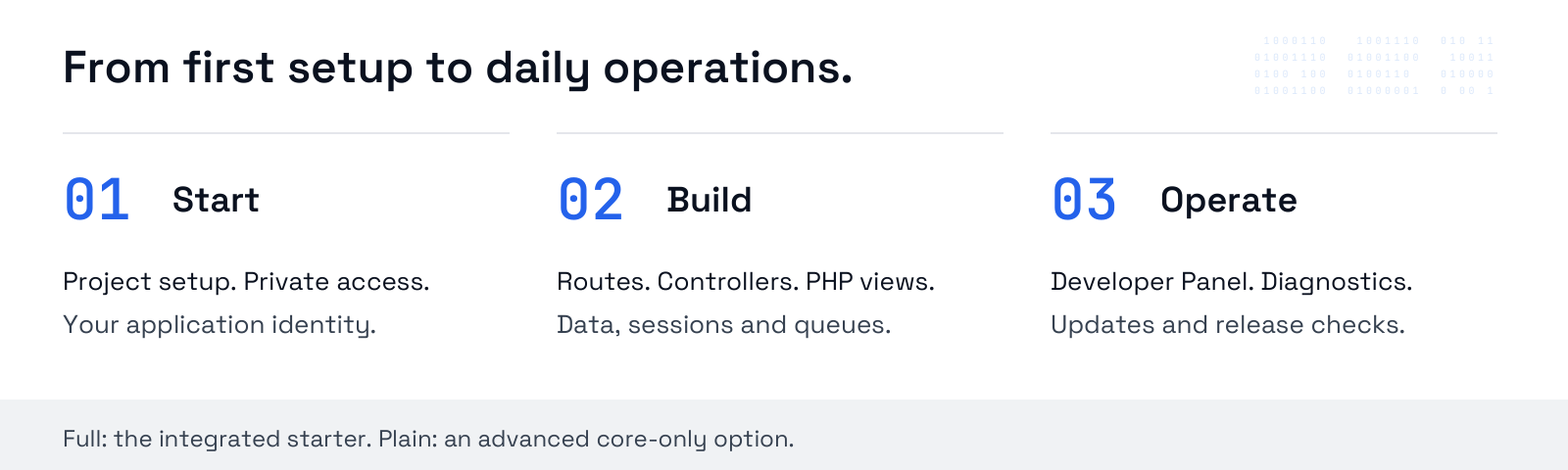
<style>
.page{position:relative;width:1568px;height:470px;background:#ffffff}
.page>*{position:absolute;margin:0}
.t1{font:45.1px "SpaceGrotesk-SemiBold";color:#0b1220}
.t2{font:56.8px "JetBrainsMono-SemiBold";color:#2563eb}
.t3{font:35.3px "SpaceGrotesk-SemiBold";color:#0b1220}
.t4{font:25.5px "SpaceGrotesk-Regular";color:#0b1220}
.t5{font:25.5px "SpaceGrotesk-Regular";color:#374151}
.t6{font:23.5px "SpaceGrotesk-Regular";color:#374151}
</style>
<div class="page">
<p class="t1" style="left:61px;top:35px;width:795px;height:63px">From first setup to daily operations.</p>
<p class="t2" style="left:555px;top:159px;width:72px;height:80px">02</p>
<p class="t2" style="left:1049px;top:159px;width:72px;height:80px">03</p>
<p class="t3" style="left:171px;top:174px;width:92px;height:50px">Start</p>
<p class="t3" style="left:664px;top:174px;width:91px;height:50px">Build</p>
<p class="t3" style="left:1158px;top:174px;width:142px;height:50px">Operate</p>
<p class="t4" style="left:61px;top:263px;width:371px;height:37px">Project setup. Private access.</p>
<p class="t4" style="left:555px;top:263px;width:382px;height:37px">Routes. Controllers. PHP views.</p>
<p class="t4" style="left:1049px;top:263px;width:366px;height:37px">Developer Panel. Diagnostics.</p>
<p class="t5" style="left:61px;top:306px;width:318px;height:37px">Your application identity.</p>
<p class="t5" style="left:555px;top:306px;width:339px;height:37px">Data, sessions and queues.</p>
<p class="t5" style="left:1049px;top:306px;width:359px;height:37px">Updates and release checks.</p>
<p class="t6" style="left:61px;top:421px;width:736px;height:36px">Full: the integrated starter. Plain: an advanced core-only option.</p>
</div>
